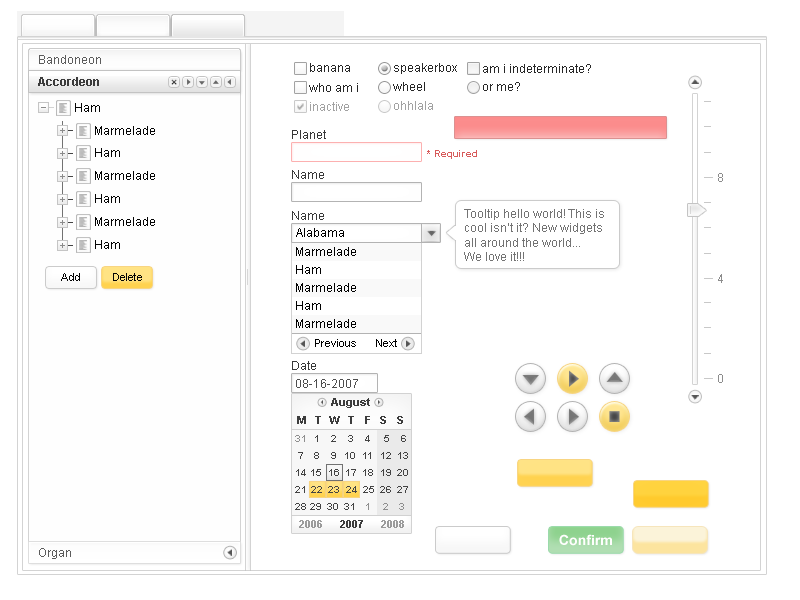
<style>
.page{position:relative;width:800px;height:600px;background:#ffffff}
.page>*{position:absolute;margin:0}
.t1{font:12px "ArialMT";color:#5c5c5c}
.t2{font:12px "ArialMT";color:#272727}
.t3{font:12px "Arial-BoldMT";color:#3b3b3b}
.t4{font:12px "ArialMT";color:#a2a2a2}
.t5{font:12px "ArialMT";color:#a1a1a1}
.t6{font:12px "ArialMT";color:#040404}
.t7{font:12px "ArialMT";color:#383838}
.t8{font:10px "Arial-BoldMT";color:#d75b5b}
.t9{font:12px "ArialMT";color:#8c8c8c}
.t10{font:12px "ArialMT";color:#737373}
.t11{font:12px "ArialMT";color:#000000}
.t12{font:11px "ArialMT";color:#040404}
.t13{font:11px "ArialMT";color:#000000}
.t14{font:12px "ArialMT";color:#4d4d4d}
.t15{font:11px "Arial-BoldMT";color:#3c3c3c}
.t16{font:10px "Arial-BoldMT";color:#8e8e8e}
.t17{font:10px "Arial-BoldMT";color:#434343}
.t18{font:10px "ArialMT";color:#434343}
.t19{font:11px "Arial-BoldMT";color:#9b9b9b}
.t20{font:14px "Arial-BoldMT";color:#fffefe}
</style>
<div class="page">
<p class="t1" style="left:39px;top:55px;width:62px;height:9px">Bandoneon</p>
<p class="t2" style="left:310px;top:63px;width:40px;height:9px">banana</p>
<p class="t2" style="left:394px;top:63px;width:63px;height:11px">speakerbox</p>
<p class="t2" style="left:483px;top:64px;width:108px;height:9px">am i indeterminate?</p>
<p class="t3" style="left:38px;top:77px;width:61px;height:9px">Accordeon</p>
<p class="t2" style="left:309px;top:83px;width:49px;height:9px">who am i</p>
<p class="t2" style="left:393px;top:82px;width:32px;height:9px">wheel</p>
<p class="t2" style="left:483px;top:82px;width:37px;height:9px">or me?</p>
<p class="t4" style="left:310px;top:102px;width:39px;height:9px">inactive</p>
<p class="t5" style="left:394px;top:101px;width:39px;height:9px">ohhlala</p>
<p class="t6" style="left:75px;top:103px;width:25px;height:9px">Ham</p>
<p class="t6" style="left:95px;top:126px;width:60px;height:9px">Marmelade</p>
<p class="t7" style="left:292px;top:130px;width:34px;height:9px">Planet</p>
<p class="t6" style="left:95px;top:148px;width:25px;height:9px">Ham</p>
<p class="t8" style="left:427px;top:150px;width:50px;height:9px">* Required</p>
<p class="t6" style="left:95px;top:171px;width:60px;height:9px">Marmelade</p>
<p class="t7" style="left:292px;top:170px;width:32px;height:9px">Name</p>
<p class="t9" style="left:718px;top:173px;width:5px;height:9px">8</p>
<p class="t6" style="left:95px;top:194px;width:25px;height:9px">Ham</p>
<p class="t10" style="left:464px;top:209px;width:140px;height:52px">Tooltip hello world! This is<br>cool isn’t it? New widgets<br>all around the world...<br>We love it!!!</p>
<p class="t6" style="left:95px;top:217px;width:60px;height:9px">Marmelade</p>
<p class="t7" style="left:292px;top:211px;width:32px;height:9px">Name</p>
<p class="t11" style="left:296px;top:228px;width:48px;height:9px">Alabama</p>
<p class="t6" style="left:95px;top:240px;width:25px;height:9px">Ham</p>
<p class="t11" style="left:296px;top:247px;width:60px;height:9px">Marmelade</p>
<p class="t11" style="left:296px;top:265px;width:25px;height:9px">Ham</p>
<p class="t12" style="left:61px;top:273px;width:19px;height:8px">Add</p>
<p class="t12" style="left:113px;top:273px;width:29px;height:8px">Delete</p>
<p class="t9" style="left:718px;top:274px;width:5px;height:9px">4</p>
<p class="t11" style="left:296px;top:283px;width:60px;height:9px">Marmelade</p>
<p class="t11" style="left:296px;top:301px;width:25px;height:9px">Ham</p>
<p class="t11" style="left:296px;top:319px;width:60px;height:9px">Marmelade</p>
<p class="t13" style="left:315px;top:339px;width:41px;height:8px">Previous</p>
<p class="t13" style="left:376px;top:339px;width:21px;height:8px">Next</p>
<p class="t7" style="left:292px;top:361px;width:24px;height:9px">Date</p>
<p class="t9" style="left:718px;top:374px;width:5px;height:9px">0</p>
<p class="t14" style="left:296px;top:379px;width:62px;height:9px">08-16-2007</p>
<p class="t15" style="left:331px;top:398px;width:39px;height:10px">August</p>
<p class="t15" style="left:297px;top:416px;width:9px;height:8px">M</p>
<p class="t15" style="left:315px;top:416px;width:6px;height:8px">T</p>
<p class="t15" style="left:329px;top:416px;width:11px;height:8px">W</p>
<p class="t15" style="left:348px;top:416px;width:6px;height:8px">T</p>
<p class="t15" style="left:365px;top:416px;width:5px;height:8px">F</p>
<p class="t15" style="left:380px;top:416px;width:6px;height:8px">S</p>
<p class="t15" style="left:397px;top:416px;width:6px;height:8px">S</p>
<p class="t16" style="left:295px;top:435px;width:10px;height:7px">31</p>
<p class="t17" style="left:315px;top:435px;width:3px;height:7px">1</p>
<p class="t17" style="left:331px;top:435px;width:5px;height:7px">2</p>
<p class="t17" style="left:348px;top:435px;width:5px;height:7px">3</p>
<p class="t17" style="left:365px;top:435px;width:5px;height:7px">4</p>
<p class="t17" style="left:384px;top:435px;width:5px;height:7px">5</p>
<p class="t17" style="left:401px;top:435px;width:5px;height:7px">6</p>
<p class="t17" style="left:298px;top:452px;width:5px;height:7px">7</p>
<p class="t17" style="left:314px;top:452px;width:5px;height:7px">8</p>
<p class="t17" style="left:331px;top:452px;width:5px;height:7px">9</p>
<p class="t17" style="left:345px;top:452px;width:10px;height:7px">10</p>
<p class="t17" style="left:363px;top:452px;width:8px;height:7px">11</p>
<p class="t17" style="left:381px;top:452px;width:10px;height:7px">12</p>
<p class="t17" style="left:398px;top:452px;width:10px;height:7px">13</p>
<p class="t17" style="left:296px;top:469px;width:10px;height:7px">14</p>
<p class="t17" style="left:311px;top:469px;width:10px;height:7px">15</p>
<p class="t18" style="left:329px;top:469px;width:10px;height:7px">16</p>
<p class="t17" style="left:346px;top:469px;width:10px;height:7px">17</p>
<p class="t17" style="left:363px;top:469px;width:10px;height:7px">18</p>
<p class="t17" style="left:381px;top:469px;width:10px;height:7px">19</p>
<p class="t17" style="left:397px;top:469px;width:11px;height:7px">20</p>
<p class="t17" style="left:295px;top:486px;width:10px;height:7px">21</p>
<p class="t17" style="left:311px;top:486px;width:11px;height:7px">22</p>
<p class="t17" style="left:328px;top:486px;width:11px;height:7px">23</p>
<p class="t17" style="left:346px;top:486px;width:11px;height:7px">24</p>
<p class="t17" style="left:363px;top:486px;width:11px;height:7px">25</p>
<p class="t17" style="left:380px;top:486px;width:11px;height:7px">26</p>
<p class="t17" style="left:397px;top:486px;width:11px;height:7px">27</p>
<p class="t17" style="left:295px;top:503px;width:11px;height:7px">28</p>
<p class="t17" style="left:310px;top:503px;width:11px;height:7px">29</p>
<p class="t17" style="left:327px;top:503px;width:11px;height:7px">30</p>
<p class="t17" style="left:344px;top:503px;width:10px;height:7px">31</p>
<p class="t16" style="left:366px;top:503px;width:3px;height:7px">1</p>
<p class="t16" style="left:383px;top:503px;width:5px;height:7px">2</p>
<p class="t16" style="left:399px;top:503px;width:5px;height:7px">3</p>
<p class="t19" style="left:299px;top:520px;width:23px;height:8px">2006</p>
<p class="t15" style="left:340px;top:520px;width:23px;height:8px">2007</p>
<p class="t19" style="left:381px;top:520px;width:23px;height:8px">2008</p>
<p class="t20" style="left:559px;top:534px;width:53px;height:12px">Confirm</p>
<p class="t1" style="left:39px;top:548px;width:32px;height:11px">Organ</p>
</div>
